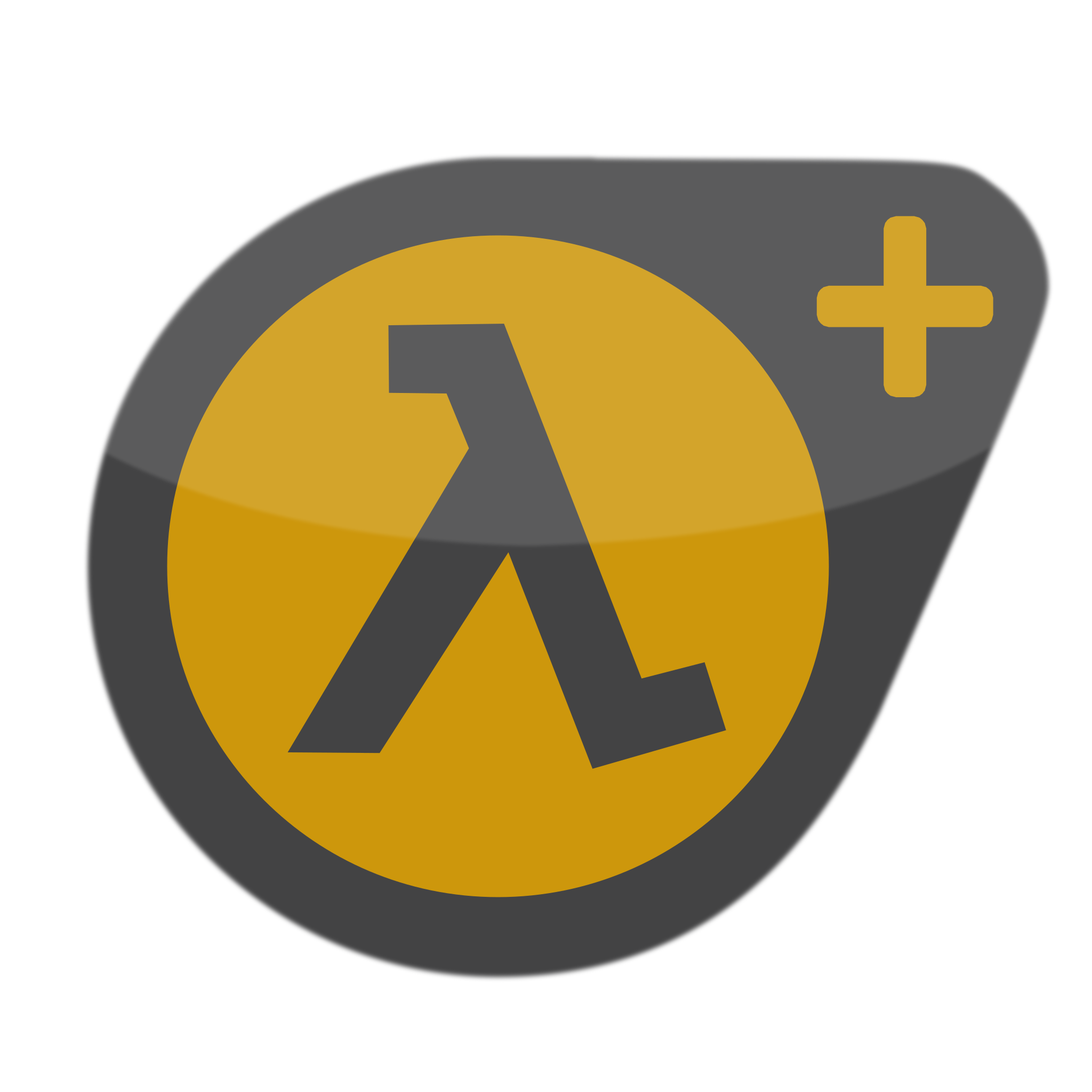
<style>
.page{position:relative;width:1092px;height:1092px;background:#ffffff}
.page>*{position:absolute;margin:0}
.t1{font:295.9px "MyriadPro-Regular";color:#d3a42b}
</style>
<div class="page">
<p class="t1" style="left:829px;top:228px;width:153px;height:158px">+</p>
</div>
